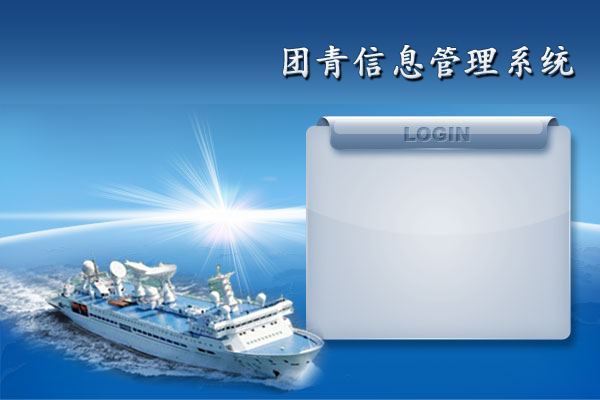
<style>
.page{position:relative;width:600px;height:400px}
.page>*{position:absolute;margin:0}
.t1{font:36px "HYc1gj";letter-spacing:0.01em;color:#efefef;font-weight:bold}
</style>
<div class="page">
<p class="t1" style="left:283px;top:45px;width:291px;height:34px">团青信息管理系统</p>
</div>
